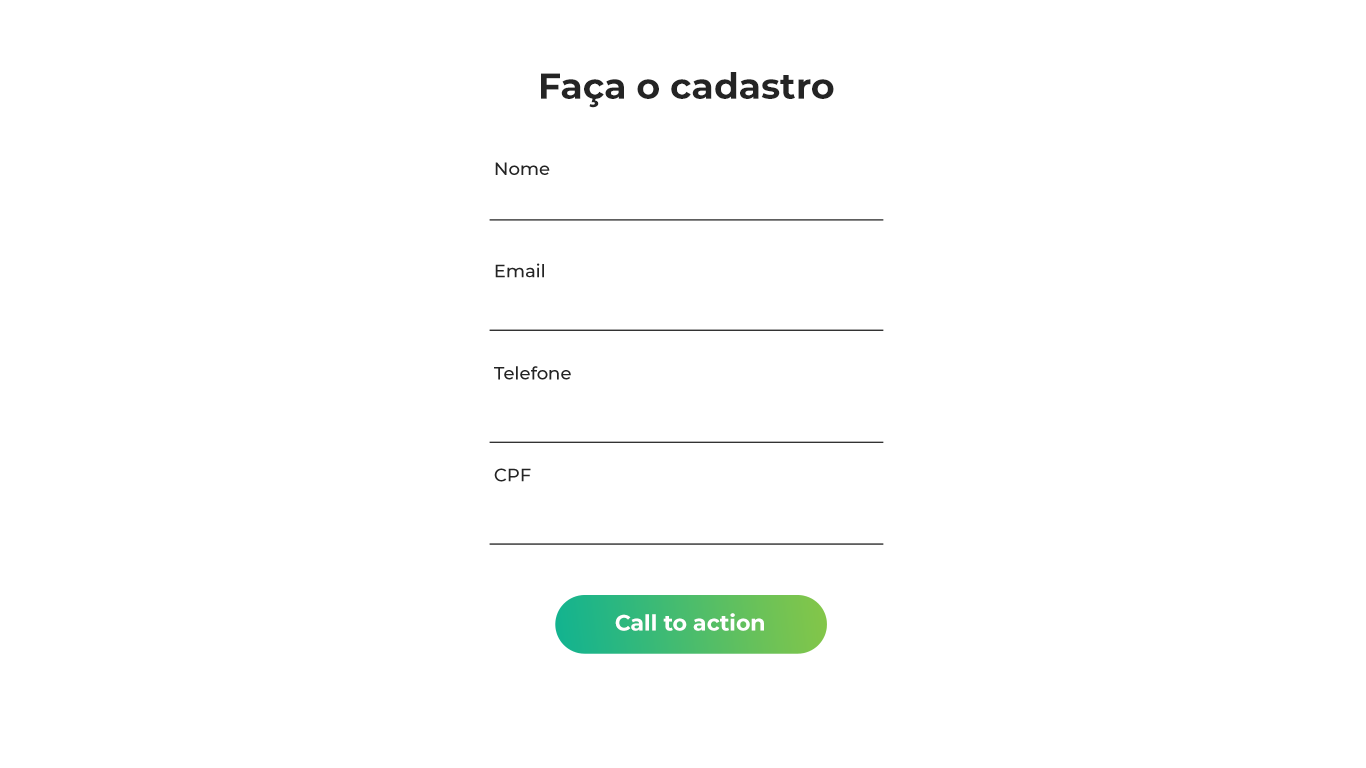
<style>
.page{position:relative;width:1366px;height:768px;background:#ffffff}
.page>*{position:absolute;margin:0}
.t1{font:36px "Montserrat-Bold";color:#242424}
.t2{font:18px "Montserrat-Medium";color:#242424}
.t3{font:22px "Montserrat-Bold";color:#ffffff}
</style>
<div class="page">
<p class="t1" style="left:541px;top:72px;width:293px;height:36px">Faça o cadastro</p>
<p class="t2" style="left:495px;top:162px;width:55px;height:13px">Nome</p>
<p class="t2" style="left:495px;top:263px;width:49px;height:15px">Email</p>
<p class="t2" style="left:494px;top:366px;width:77px;height:14px">Telefone</p>
<p class="t2" style="left:494px;top:468px;width:37px;height:14px">CPF</p>
<p class="t3" style="left:615px;top:613px;width:149px;height:18px">Call to action</p>
</div>
